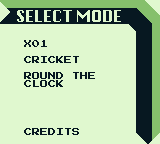
<style>
.page{position:relative;width:160px;height:144px;background:#e0f8cf}
.page>*{position:absolute;margin:0}
.t1{font:16px "Krungthep";color:#e0f8cf}
.t2{font:8px/8px "PressStart2P-Regular";color:#071821}
</style>
<div class="page">
<p class="t1" style="left:17px;top:10px;width:104px;height:12px">SELECT MODE</p>
<p class="t2" style="left:24px;top:40px;width:71px;height:95px">X01<br><br>CRICKET<br><br>ROUND THE<br>CLOCK<br><br><br><br><br><br>CREDITS</p>
</div>
